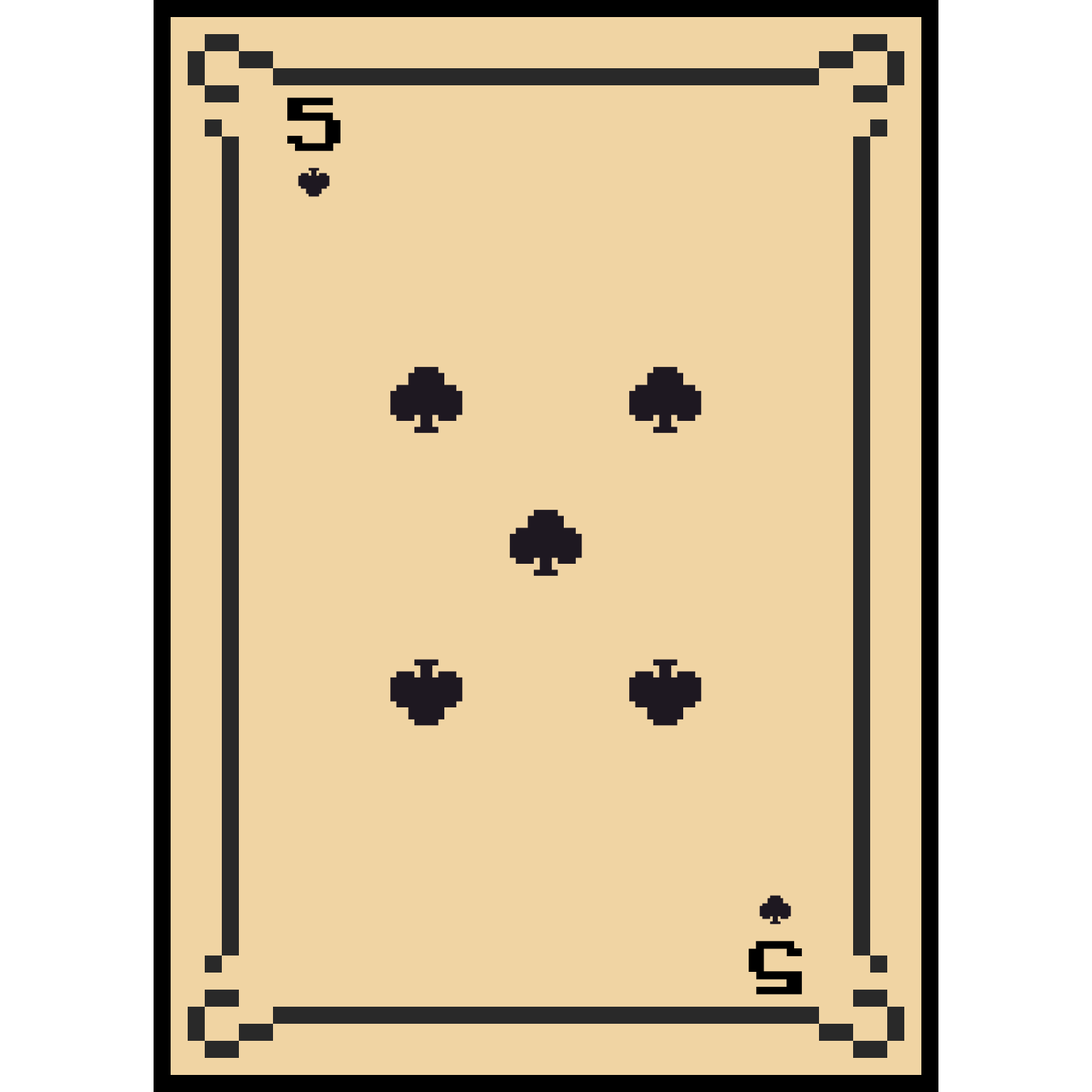
<style>
.page{position:relative;width:1092px;height:1092px;background:#f0d4a3}
.page>*{position:absolute;margin:0}
.t1{font:106.6px "ArcadeClassic";color:#000000}
</style>
<div class="page">
<p class="t1" style="left:287px;top:97px;width:54px;height:54px">5</p>
<p class="t1" style="left:749px;top:941px;width:53px;height:54px;rotate:180deg">5</p>
</div>
